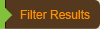
<style>
.page{position:relative;width:100px;height:29px;background:#54391e}
.page>*{position:absolute;margin:0}
.t1{font:12px "ArialMT";color:#ff9000}
</style>
<div class="page">
<p class="t1" style="left:20px;top:10px;width:70px;height:9px">Filter Results</p>
</div>
